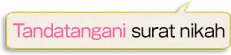
<style>
.page{position:relative;width:231px;height:55px}
.page>*{position:absolute;margin:0}
.t1{font:18px "GothicMB101Pro-Medium";letter-spacing:-0.04em;color:#f068a0;scale:0.9 1}
.t2{font:18px "GothicMB101Pro-Medium";letter-spacing:-0.04em;color:#221517;scale:0.9 1}
</style>
<div class="page">
<p class="t1" style="left:13px;top:23px;width:212px;height:17px">Tandatangani<span class="t2"> surat nikah</span></p>
</div>
